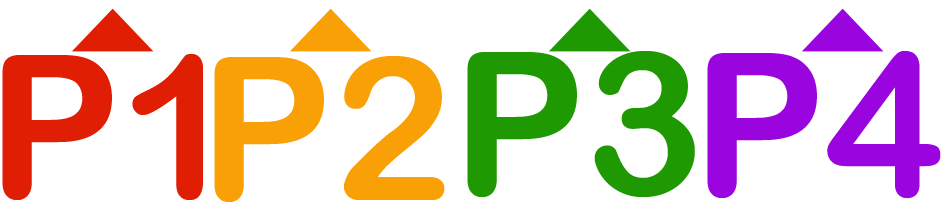
<style>
.page{position:relative;width:948px;height:208px;background:#ffffff}
.page>*{position:absolute;margin:0}
.t1{font:200px "ArialRoundedMTBold";color:#df1e04}
.t2{font:200px "ArialRoundedMTBold";color:#1e9901}
.t3{font:200px "ArialRoundedMTBold";color:#9a04df}
.t4{font:200px "ArialRoundedMTBold";color:#f9a006}
</style>
<div class="page">
<p class="t1" style="left:2px;top:54px;width:202px;height:147px">P1</p>
<p class="t2" style="left:467px;top:51px;width:228px;height:147px">P3</p>
<p class="t3" style="left:707px;top:51px;width:234px;height:148px">P4</p>
<p class="t4" style="left:214px;top:56px;width:231px;height:146px">P2</p>
</div>
